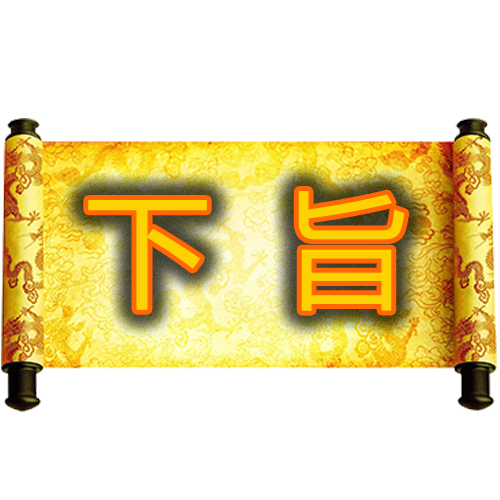
<style>
.page{position:relative;width:500px;height:500px;background:#ffffff}
.page>*{position:absolute;margin:0}
.t1{font:125px "MicrosoftYaHei";color:#fcd202}
</style>
<div class="page">
<p class="t1" style="left:88px;top:191px;width:317px;height:120px">下  旨</p>
</div>
